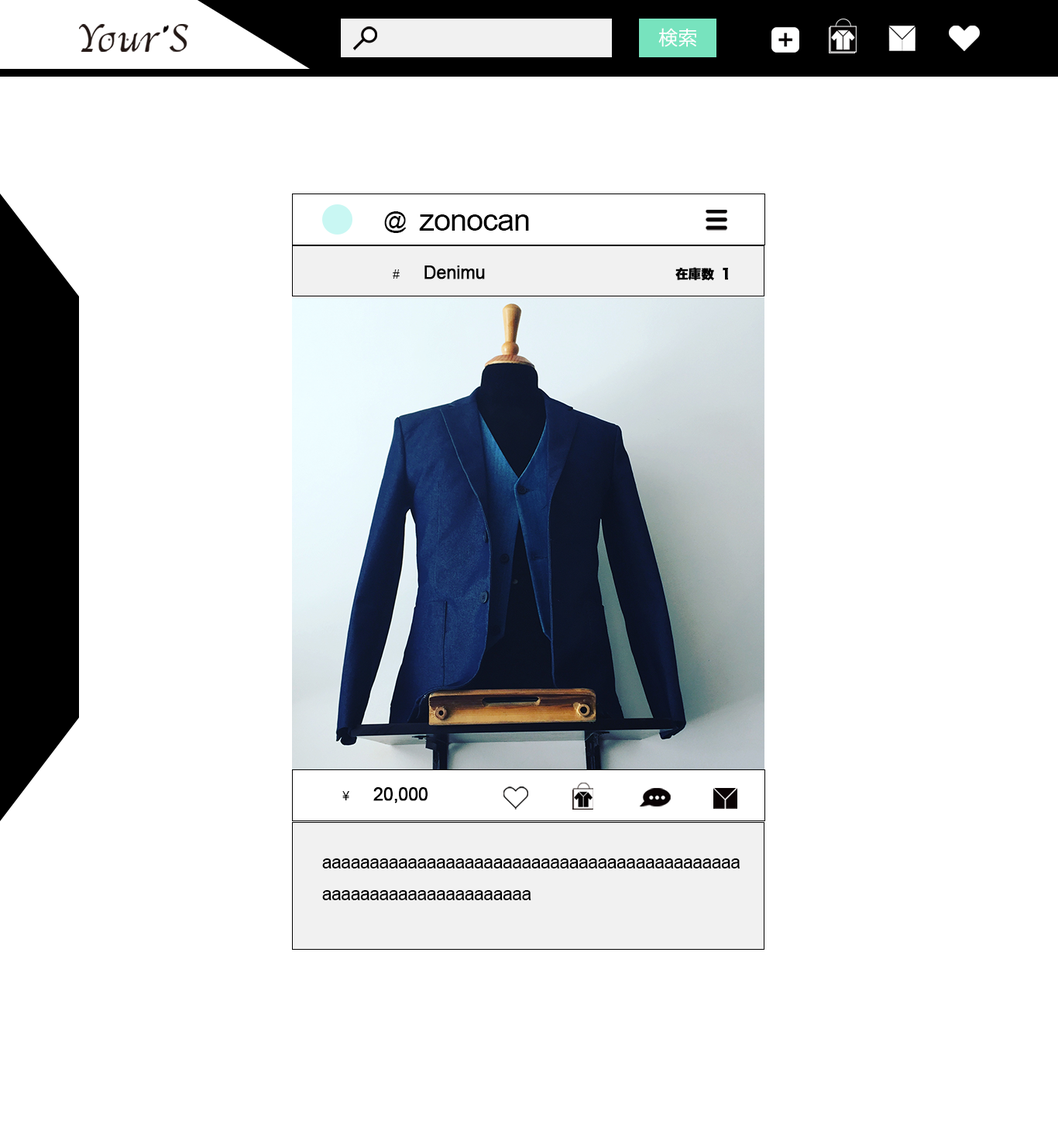
<style>
.page{position:relative;width:1058px;height:1127px;background:#ffffff}
.page>*{position:absolute;margin:0}
.t1{font:19.4px "KozGoPr6N-Regular";letter-spacing:-0.025em;color:#ffffff}
.t2{font:23px "ArialMT";letter-spacing:-0.025em;color:#000000}
.t3{font:30.7px "ArialMT";letter-spacing:-0.025em;color:#000000}
.t4{font:12.8px "ArialMT";letter-spacing:-0.025em;color:#000000}
.t5{font:17.9px "ArialMT";letter-spacing:-0.025em;color:#000000;font-weight:bold}
.t6{font:12.8px "HiraKakuStdN-W8";letter-spacing:-0.025em;color:#000000;font-weight:bold}
.t7{font:17.9px "ArialMT";letter-spacing:-0.025em;color:#000000}
</style>
<div class="page">
<p class="t1" style="left:658px;top:28px;width:38px;height:19px">検索</p>
<p class="t2" style="left:384px;top:211px;width:23px;height:22px">@</p>
<p class="t3" style="left:419px;top:214px;width:110px;height:17px">zonocan</p>
<p class="t4" style="left:393px;top:269px;width:7px;height:10px">#</p>
<p class="t5" style="left:424px;top:266px;width:61px;height:14px">Denimu</p>
<p class="t6" style="left:675px;top:267px;width:39px;height:14px">在庫数</p>
<p class="t6" style="left:722px;top:268px;width:6px;height:12px">1</p>
<p class="t4" style="left:342px;top:791px;width:7px;height:10px">¥</p>
<p class="t5" style="left:373px;top:787px;width:54px;height:17px">20,000</p>
<p class="t7" style="left:322px;top:859px;width:417px;height:42px">aaaaaaaaaaaaaaaaaaaaaaaaaaaaaaaaaaaaaaaaaaaa<br>aaaaaaaaaaaaaaaaaaaaaa</p>
</div>
